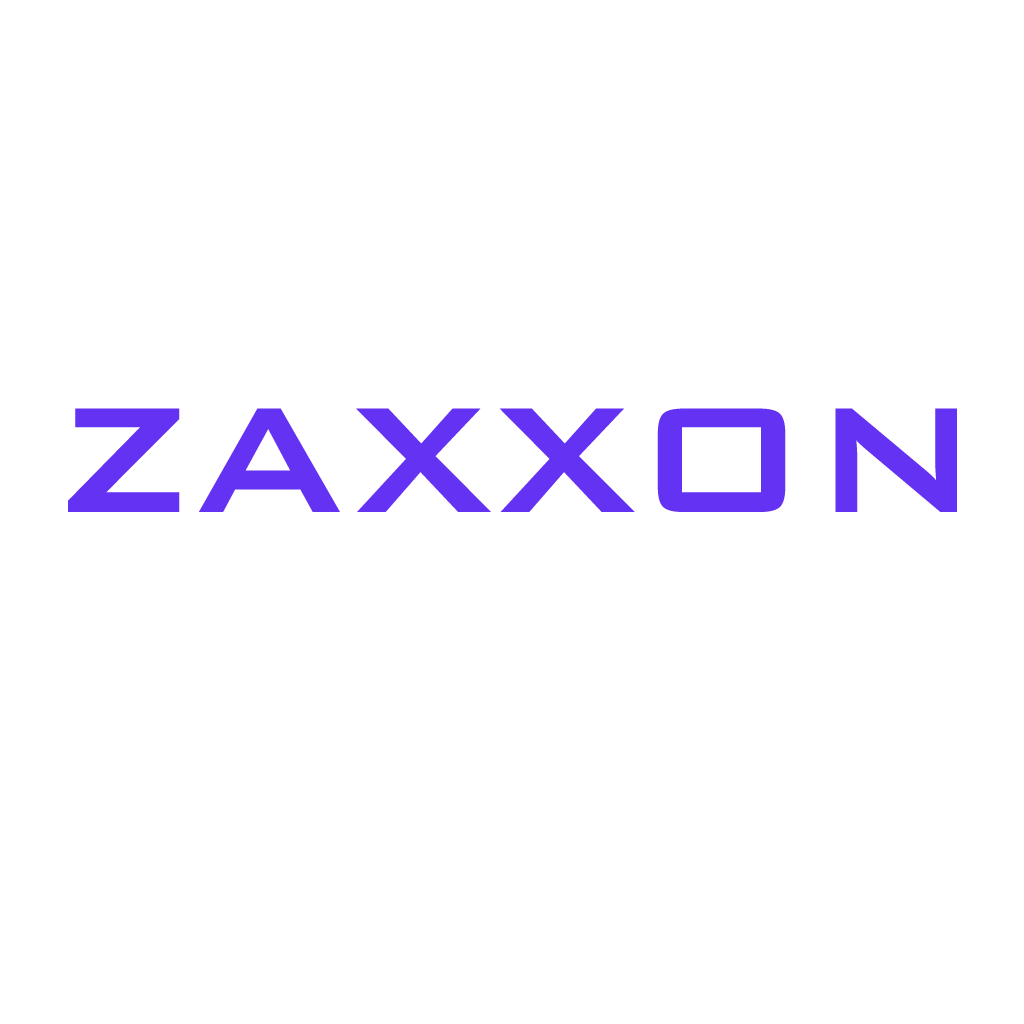
<style>
.page{position:relative;width:1024px;height:1024px;background:#ffffff}
.page>*{position:absolute;margin:0}
.t1{font:200px "BankGothicBT-Medium";color:#6432f2}
</style>
<div class="page">
<p class="t1" style="left:68px;top:408px;width:889px;height:104px">ZAXXON</p>
</div>
